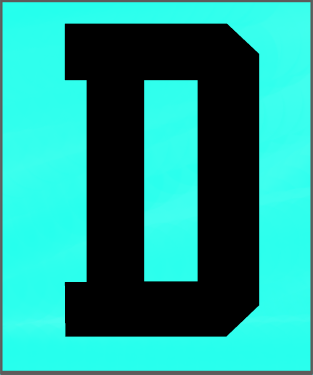
<style>
.page{position:relative;width:313px;height:375px;background:#000000}
.page>*{position:absolute;margin:0}
.t1{font:386.3px "Athletic";color:#000000;font-weight:bold;scale:0.93 1}
</style>
<div class="page">
<p class="t1" style="left:64px;top:23px;width:196px;height:314px">D</p>
</div>
